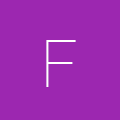
<style>
.page{position:relative;width:120px;height:120px;background:#9c27b0}
.page>*{position:absolute;margin:0}
.t1{font:66px "Roboto-Thin";letter-spacing:-0.05em;color:#ffffff}
</style>
<div class="page">
<p class="t1" style="left:46px;top:40px;width:30px;height:47px">F</p>
</div>
